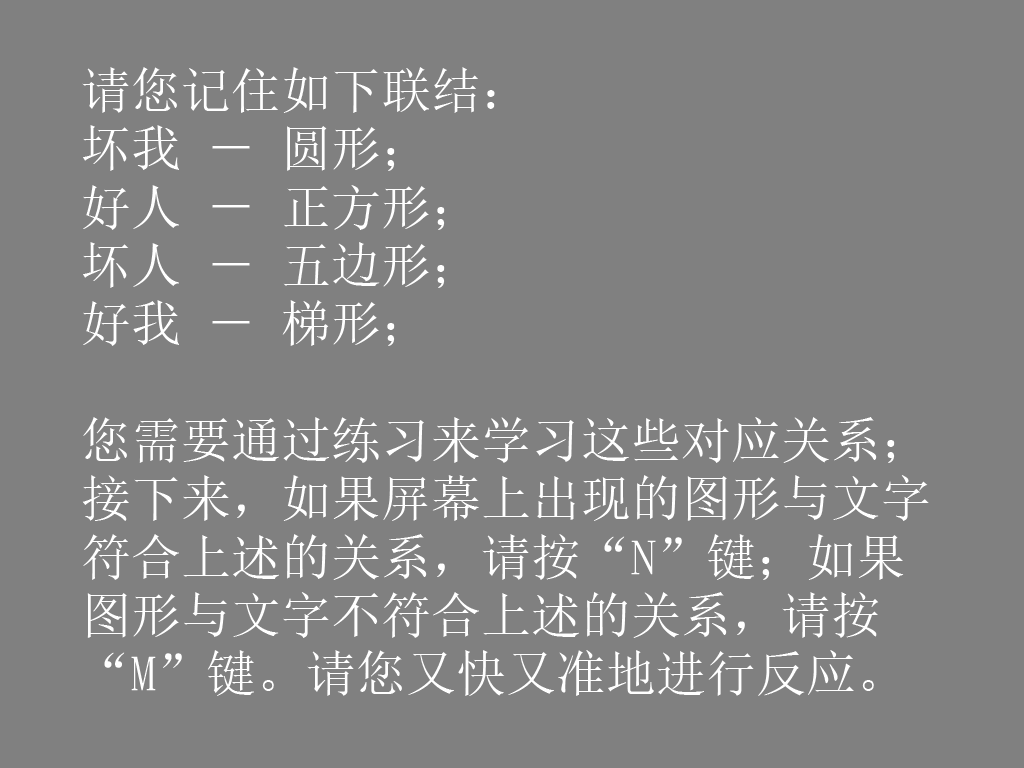
<style>
.page{position:relative;width:1024px;height:768px;background:#808080}
.page>*{position:absolute;margin:0}
.t1{font:50px/58.3px "SimSun";color:#ffffff}
</style>
<div class="page">
<p class="t1" style="left:82px;top:67px;width:847px;height:629px">请您记住如下联结：<br>坏我 － 圆形； <br>好人 － 正方形；<br>坏人 － 五边形；<br>好我 － 梯形；<br><br>您需要通过练习来学习这些对应关系；<br>接下来，如果屏幕上出现的图形与文字<br>符合上述的关系，请按“N”键；如果<br>图形与文字不符合上述的关系，请按<br>“M”键。请您又快又准地进行反应。</p>
</div>
